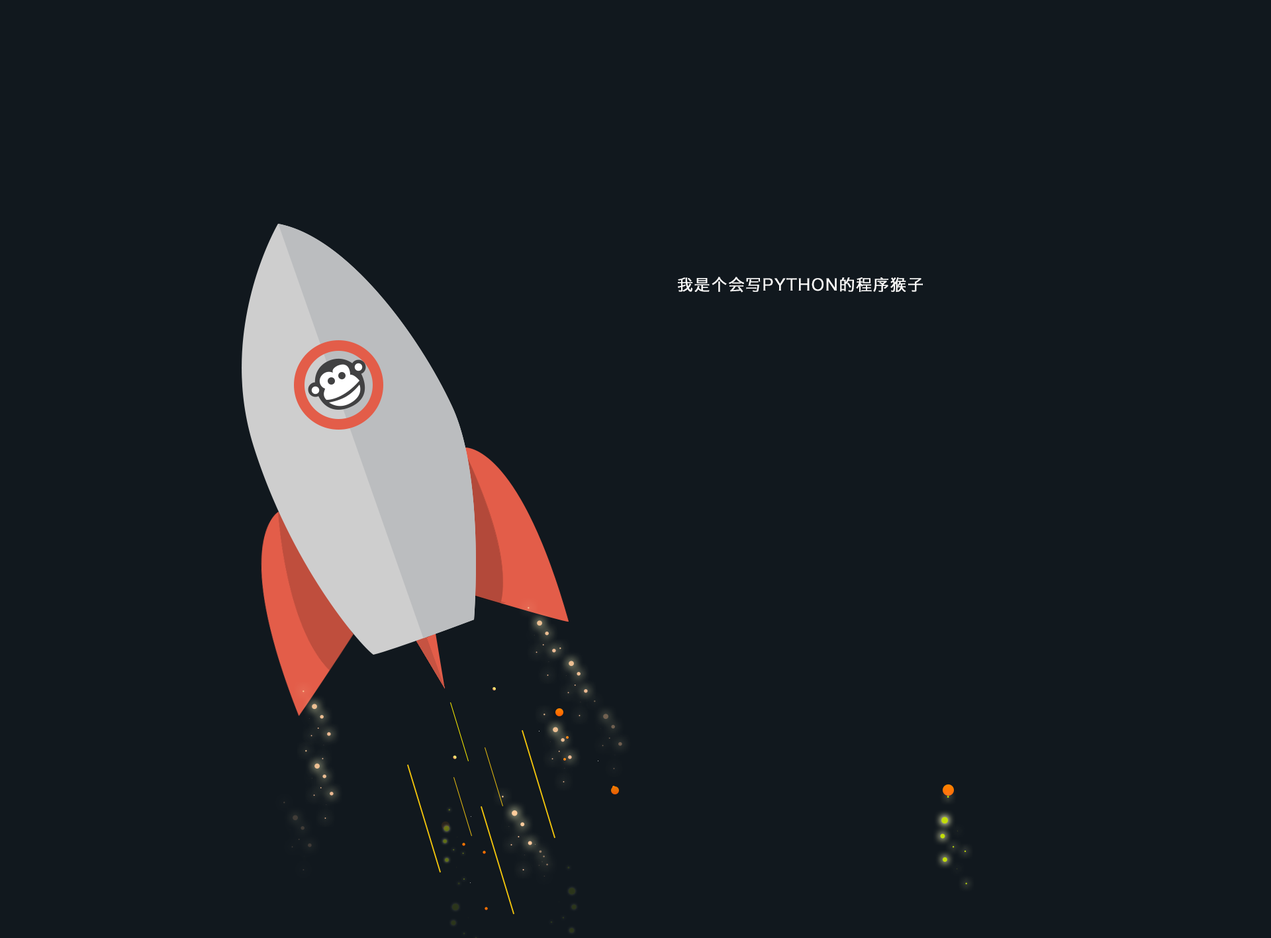
<style>
.page{position:relative;width:1271px;height:938px;background:#11181e}
.page>*{position:absolute;margin:0}
.t1{font:15.9px "HiraginoSansGB-W3";letter-spacing:0.05em;color:#ffffff;text-transform:uppercase;font-weight:bold}
</style>
<div class="page">
<p class="t1" style="left:678px;top:277px;width:245px;height:16px">我是个会写PYTHON的程序猴子</p>
</div>
